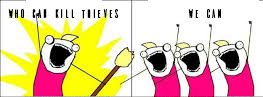
<style>
.page{position:relative;width:263px;height:97px;background:#ffffff}
.page>*{position:absolute;margin:0}
.t1{font:12px "Ailerons-Regular";color:#000000;scale:0.8 1}
</style>
<div class="page">
<p class="t1" style="left:8px;top:9px;width:110px;height:10px">who can kill thieves</p>
<p class="t1" style="left:188px;top:9px;width:33px;height:9px">WE CAN</p>
</div>
